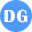
<style>
.page{position:relative;width:32px;height:32px;background:#4f9af9}
.page>*{position:absolute;margin:0}
.t1{font:18px "BritannicBold";letter-spacing:-0.12em;color:#ffffff}
</style>
<div class="page">
<p class="t1" style="left:4px;top:9px;width:24px;height:14px">D G</p>
</div>
